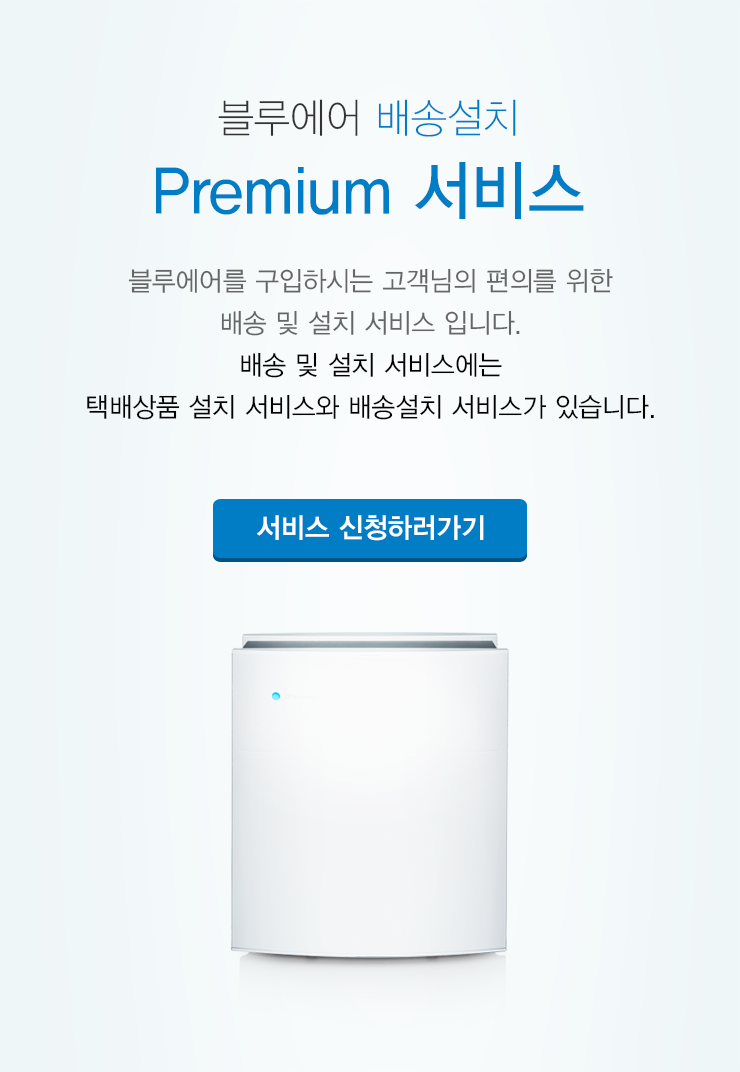
<style>
.page{position:relative;width:740px;height:1072px}
.page>*{position:absolute;margin:0}
.t1{font:65px/80px "YDVYGO33";color:#007dc5;scale:0.95 1}
.t2{font:41px "YDVYGO31";color:#333333;scale:0.95 1}
.t3{font:41px "YDVYGO31";color:#007dc5;scale:0.95 1}
.t4{font:27px/42px "YDVYGO32";color:#000000;scale:0.95 1}
.t5{font:27px/42px "YDVYGO32";color:#666666;scale:0.95 1}
.t6{font:28px "YDVYGO34";color:#ffffff;scale:0.95 1}
</style>
<div class="page">
<p class="t1" style="left:156px;top:99px;width:428px;height:120px;text-align:center"><span class="t2">블루에어 </span><span class="t3">배송설치<br></span>Premium 서비스</p>
<p class="t4" style="left:87px;top:268px;width:567px;height:152px;text-align:center"><span class="t5">블루에어를 구입하시는 고객님의 편의를 위한<br>배송 및 설치 서비스 입니다.<br></span>배송 및 설치 서비스에는<br>택배상품 설치 서비스와 배송설치 서비스가 있습니다.</p>
<p class="t6" style="left:257px;top:515px;width:227px;height:26px">서비스 신청하러가기</p>
</div>
